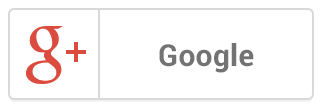
<style>
.page{position:relative;width:322px;height:108px;background:#ffffff}
.page>*{position:absolute;margin:0}
.t1{font:30px "Roboto-Bold";letter-spacing:0.01em;color:#737373}
</style>
<div class="page">
<p class="t1" style="left:159px;top:43px;width:95px;height:30px">Google</p>
</div>
